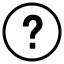
<style>
.page{position:relative;width:64px;height:64px;background:#ffffff}
.page>*{position:absolute;margin:0}
.t1{font:48px "MS-PGothic";color:#000000;font-weight:bold}
</style>
<div class="page">
<p class="t1" style="left:23px;top:14px;width:20px;height:35px">?</p>
</div>
